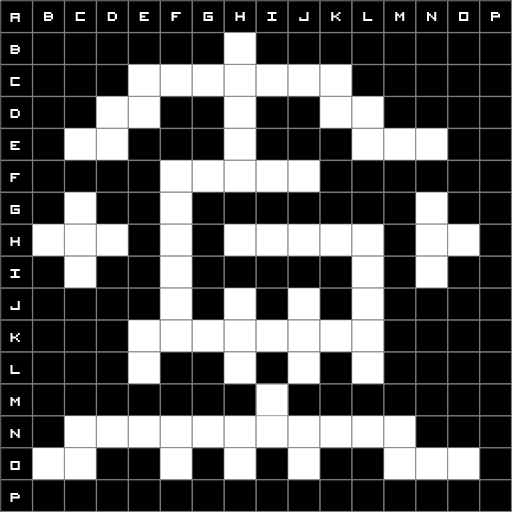
<style>
.page{position:relative;width:512px;height:512px;background:#000000}
.page>*{position:absolute;margin:0}
.t1{font:18px/32px "VisitorTT1BRK";color:#ffffff}
.t2{font:18px "VisitorTT1BRK";letter-spacing:1.192em;color:#ffffff}
</style>
<div class="page">
<p class="t1" style="left:10px;top:13px;width:10px;height:489px;text-align:center">A<br>B<br>C<br>D<br>E<br>F<br>G<br>H<br>I<br>J<br>K<br>L<br>M<br>N<br>O<br>P</p>
<p class="t2" style="left:44px;top:12px;width:456px;height:9px">BCDEFGHIJKLMNOP</p>
</div>
